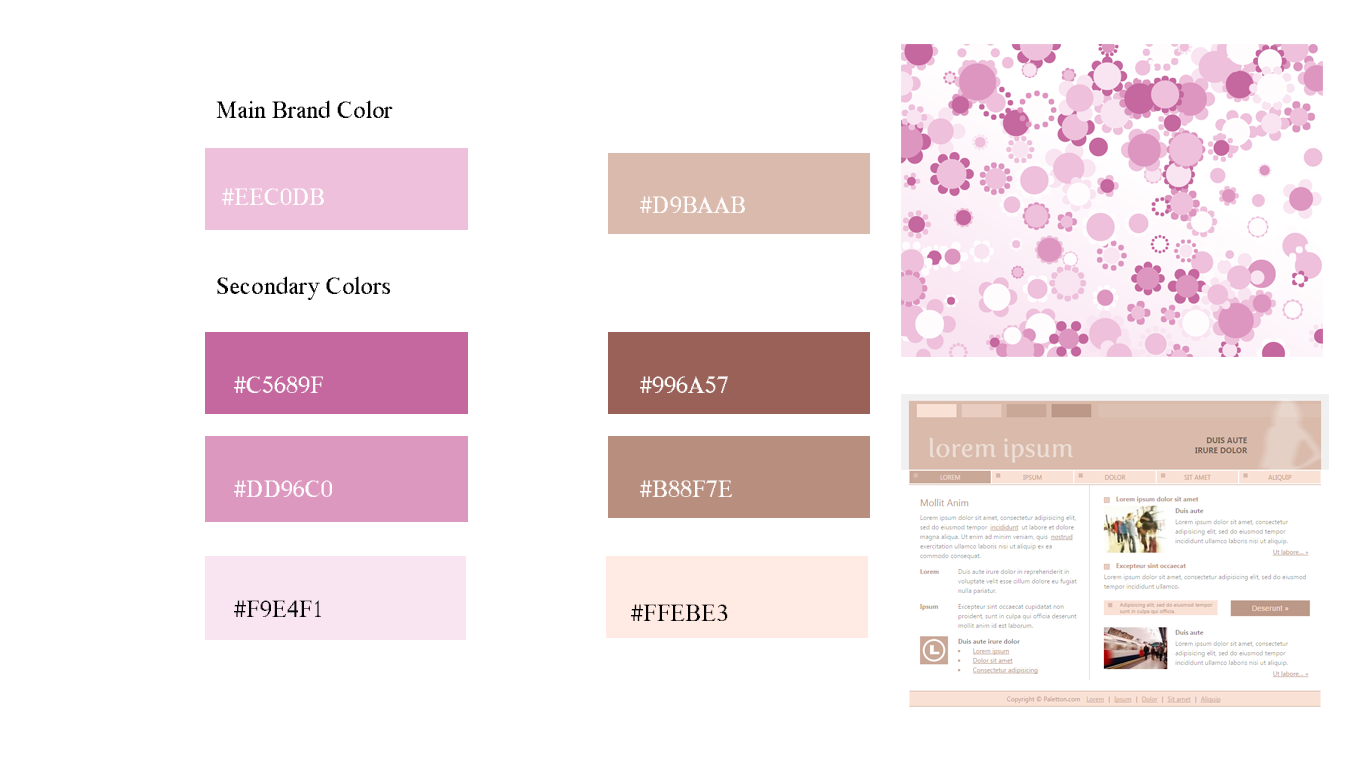
<style>
.page{position:relative;width:1366px;height:768px;background:#ffffff}
.page>*{position:absolute;margin:0}
.t1{font:24px "MS Serif";color:#040404}
.t2{font:24px "MS Serif";color:#fefefe}
.t3{font:24px "MS Serif";color:#fefdfc}
.t4{font:24px "MS Serif";color:#fefdfe}
.t5{font:24px "MS Serif";color:#030303}
.t6{font:24px "MS Serif";color:#ffebe3}
</style>
<div class="page">
<p class="t1" style="left:216px;top:100px;width:177px;height:18px">Main Brand Color</p>
<p class="t2" style="left:222px;top:188px;width:102px;height:17px">#EEC0DB</p>
<p class="t3" style="left:640px;top:196px;width:105px;height:17px">#D9BAAB</p>
<p class="t1" style="left:217px;top:276px;width:173px;height:24px">Secondary Colors</p>
<p class="t4" style="left:234px;top:376px;width:89px;height:17px">#C5689F</p>
<p class="t3" style="left:640px;top:376px;width:88px;height:17px">#996A57</p>
<p class="t4" style="left:234px;top:480px;width:98px;height:17px">#DD96C0</p>
<p class="t3" style="left:640px;top:480px;width:92px;height:17px">#B88F7E</p>
<p class="t1" style="left:234px;top:600px;width:87px;height:17px">#F9E4F1</p>
<p class="t5" style="left:631px;top:604px;width:97px;height:17px">#FFEBE<span class="t6">3</span></p>
</div>
